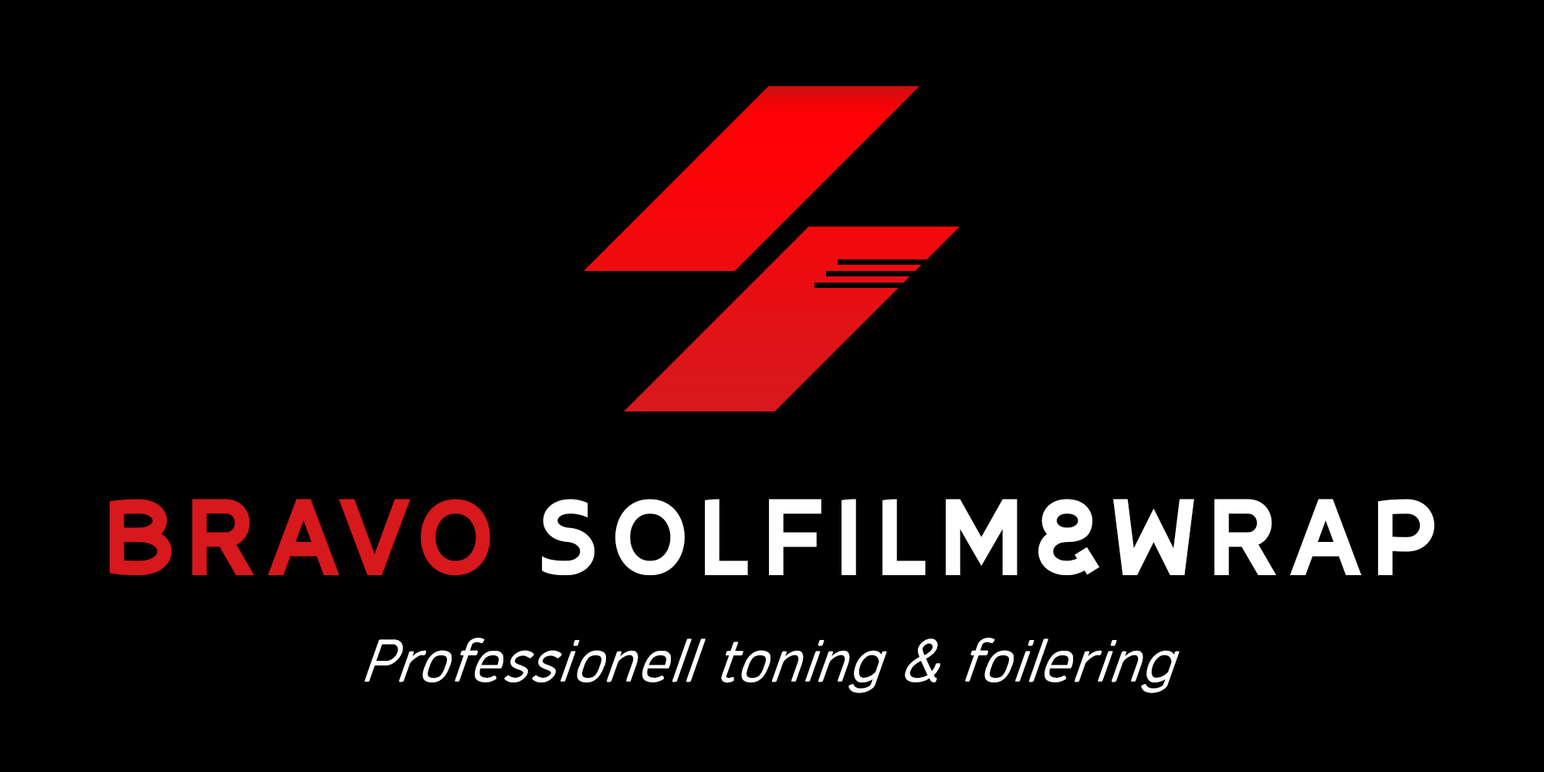
<style>
.page{position:relative;width:1544px;height:772px;background:#000000}
.page>*{position:absolute;margin:0}
.t1{font:96.5px "Oliciy";letter-spacing:0.07em;color:#ffffff}
.t2{font:96.5px "Oliciy";letter-spacing:0.07em;color:#d7181c}
.t3{font:64.3px "SimvoniItalic";color:#ffffff;font-style:italic}
</style>
<div class="page">
<p class="t1" style="left:110px;top:499px;width:1325px;height:76px"><span class="t2">BRAVO </span>SOLFILM&amp;WRAP</p>
<p class="t3" style="left:364px;top:638px;width:816px;height:55px">Professionell toning &amp; foilering</p>
</div>
